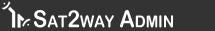
<style>
.page{position:relative;width:215px;height:31px;background:#333333}
.page>*{position:absolute;margin:0}
.t1{font:23.7px "ArialRoundedMTBold";color:#ffffff;font-variant:small-caps;scale:0.9 1}
</style>
<div class="page">
<p class="t1" style="left:34px;top:10px;width:139px;height:18px">Sat2way Admin</p>
</div>
